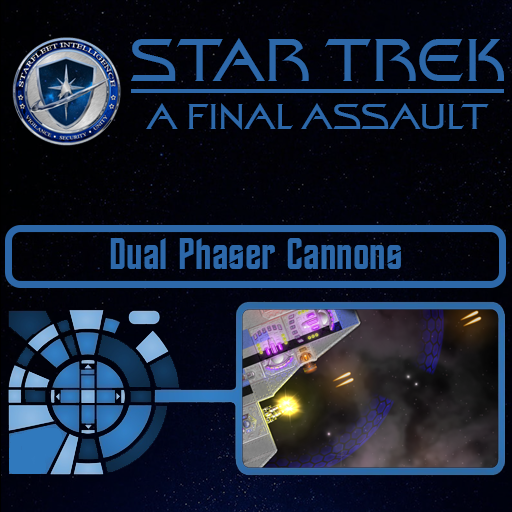
<style>
.page{position:relative;width:512px;height:512px}
.page>*{position:absolute;margin:0}
.t1{font:60px "StarTrekFilmBT-Regular";color:#2d68a9}
.t2{font:36px "StarTrekFilmBT-Regular";color:#2d68a9}
.t3{font:44px "StarTrekBT-Regular";color:#2d68a9}
</style>
<div class="page">
<p class="t1" style="left:131px;top:38px;width:373px;height:43px">STAR TREK</p>
<p class="t2" style="left:146px;top:103px;width:343px;height:27px">A FINAL ASSAULT</p>
<p class="t3" style="left:110px;top:238px;width:291px;height:31px">Dual Phaser Cannons</p>
</div>
